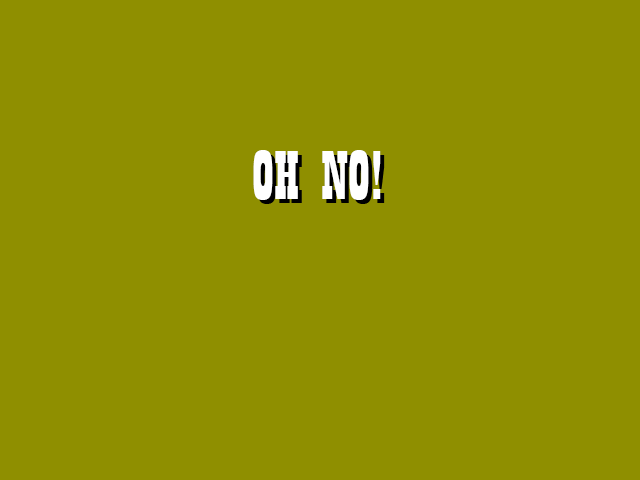
<style>
.page{position:relative;width:640px;height:480px;background:#8f8f00}
.page>*{position:absolute;margin:0}
.t1{font:72px "Playbill";color:#ffffff}
</style>
<div class="page">
<p class="t1" style="left:253px;top:150px;width:128px;height:50px">OH NO!</p>
</div>
